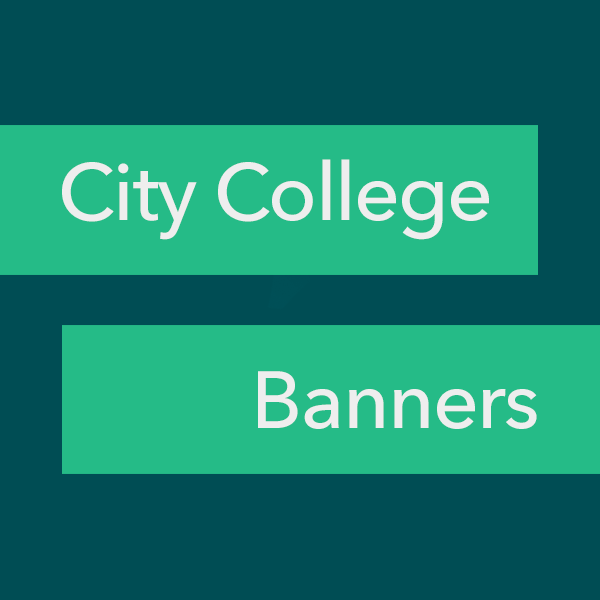
<style>
.page{position:relative;width:600px;height:600px;background:#004d54}
.page>*{position:absolute;margin:0}
.t1{font:80px "AvenirNext-Medium";letter-spacing:-0.02em;color:#eeeeee}
</style>
<div class="page">
<p class="t1" style="left:62px;top:159px;width:427px;height:81px">City College</p>
<p class="t1" style="left:258px;top:371px;width:279px;height:58px">Banners</p>
</div>
